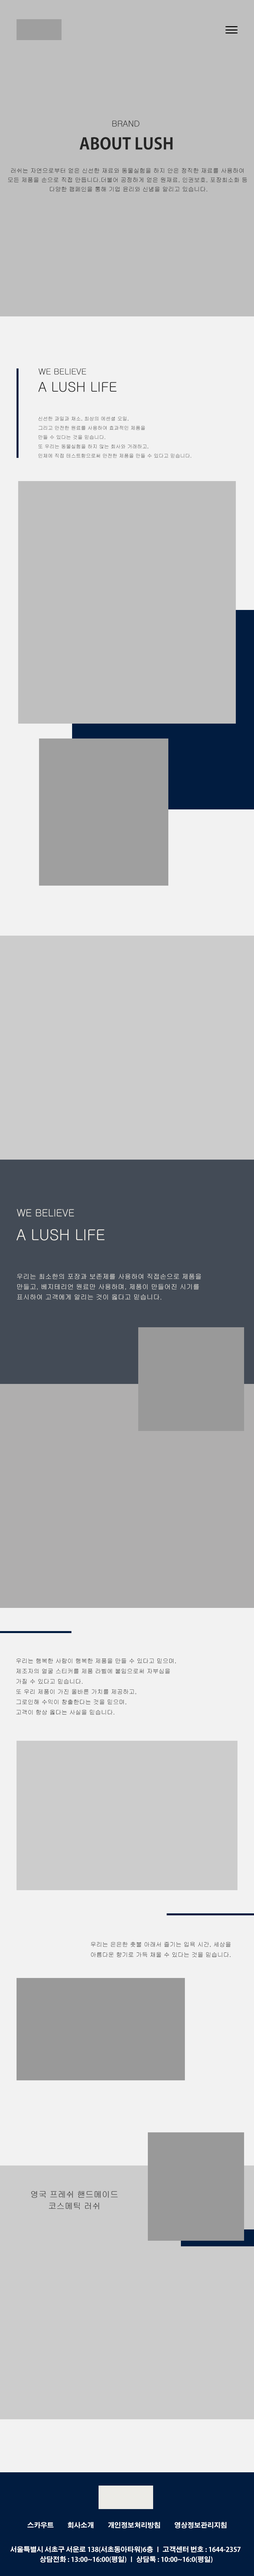
<style>
.page{position:relative;width:254px;height:2576px;background:#cccccc}
.page>*{position:absolute;margin:0}
.t1{font:8.3px "Gulim";color:#262626}
.t2{font:15.9px "AdobeGothicStd-Bold";color:#262626}
.t3{font:6px/9.3px "Gulim";color:#262626}
.t4{font:13.3px "Gulim";color:#262626}
.t5{font:5px/9.3px "Gulim";color:#262626}
.t6{font:9.9px "Gulim";color:#f5f2eb}
.t7{font:14.9px "Gulim";color:#f5f2eb}
.t8{font:6.6px/10.3px "Gulim";color:#f5f2eb}
.t9{font:6px/10.3px "Gulim";color:#262626}
.t10{font:8.3px/11.6px "Gulim";color:#262626}
.t11{font:6.6px "AdobeGothicStd-Bold";color:#ffffff}
.t12{font:6.6px/9.9px "AdobeGothicStd-Bold";color:#ffffff}
</style>
<div class="page">
<p class="t1" style="left:112px;top:120px;width:28px;height:7px">BRAND</p>
<p class="t2" style="left:80px;top:137px;width:93px;height:13px">ABOUT LUSH</p>
<p class="t3" style="left:8px;top:168px;width:239px;height:24px;text-align:center">러쉬는 자연으로부터 얻은 신선한 재료와 동물실험을 하지 안은 정직한 재료를 사용하여 <br>모든 제품을 손으로 직접 만듭니다.더불어 공정하게 얻은 원재료, 인권보호, 포장최소화 등 <br>다양한 캠페인을 통해 기업 윤리와 신념을 알리고 있습니다.</p>
<p class="t1" style="left:38px;top:368px;width:48px;height:7px">WE BELIEVE</p>
<p class="t4" style="left:38px;top:382px;width:79px;height:10px">A LUSH LIFE</p>
<p class="t5" style="left:38px;top:416px;width:154px;height:42px">신선한 과일과 채소, 최상의 에센셜 오일,<br>그리고 안전한 원료를 사용하여 효과적인 제품을<br>만들 수 있다는 것을 믿습니다.<br>또 우리는 동물실험을 하지 않는 회사와 거래하고,<br>인체에 직접 테스트함으로써 안전한 제품을 만들 수 있다고 믿습니다.</p>
<p class="t6" style="left:17px;top:1209px;width:57px;height:8px">WE BELIEVE</p>
<p class="t7" style="left:17px;top:1229px;width:88px;height:11px">A LUSH LIFE</p>
<p class="t8" style="left:17px;top:1274px;width:184px;height:26px">우리는 최소한의 포장과 보존제를 사용하여 직접손으로 제품을 <br>만들고, 베지테리언 원료만 사용하며, 제품이 만들어진 시기를 <br>표시하여 고객에게 알리는 것이 옳다고 믿습니다.</p>
<p class="t9" style="left:16px;top:1658px;width:160px;height:57px">우리는 행복한 사람이 행복한 제품을 만들 수 있다고 믿으며, <br>제조자의 얼굴 스티커를 제품 라벨에 붙임으로써 자부심을 <br>가질 수 있다고 믿습니다.<br>또 우리 제품이 가진 올바른 가치를 제공하고, <br>그로인해 수익이 창출한다는 것을 믿으며, <br>고객이 항상 옳다는 사실을 믿습니다.</p>
<p class="t9" style="left:91px;top:1942px;width:140px;height:15px">우리는 은은한 촛불 아래서 즐기는 입욕 시간, 세상을 <br>아름다운 향기로 가득 채울 수 있다는 것을 믿습니다.</p>
<p class="t10" style="left:31px;top:2191px;width:87px;height:19px;text-align:center">영국 프레쉬 핸드메이드<br>코스메틱 러쉬</p>
<p class="t11" style="left:27px;top:2522px;width:27px;height:6px">스카우트</p>
<p class="t11" style="left:68px;top:2522px;width:26px;height:6px">회사소개</p>
<p class="t11" style="left:108px;top:2522px;width:52px;height:6px">개인정보처리방침</p>
<p class="t11" style="left:175px;top:2522px;width:52px;height:6px">영상정보관리지침</p>
<p class="t12" style="left:10px;top:2546px;width:231px;height:17px;text-align:center">서울특별시 서초구 서운로 138(서초동아타워)6층 ㅣ 고객센터 번호 : 1644-2357 <br>상담전화 : 13:00~16:00(평일) ㅣ 상담톡 : 10:00~16:0(평일)</p>
</div>
